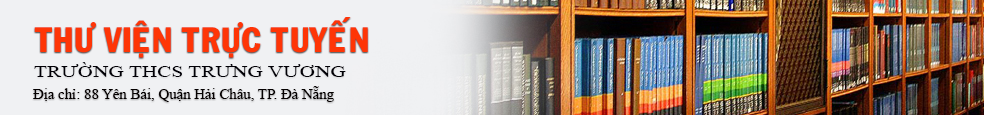
<style>
.page{position:relative;width:984px;height:115px;background:#f0f1f3}
.page>*{position:absolute;margin:0}
.t1{font:34.4px "VNI-Franko";color:#fe3506}
.t2{font:17.5px "TimesNewRomanPSMT";color:#010006;scale:1.22 1}
.t3{font:14.6px "TimesNewRomanPSMT";color:#040000}
</style>
<div class="page">
<p class="t1" style="left:34px;top:17px;width:334px;height:41px">THÖ VIEÄN TRÖÏC TUYEÁN</p>
<p class="t2" style="left:34px;top:62px;width:312px;height:15px">TRƯỜNG THCS TRƯNG VƯƠNG</p>
<p class="t3" style="left:33px;top:86px;width:301px;height:16px">Địa chỉ: 88 Yên Bái, Quận Hải Châu, TP. Đà Nẵng</p>
</div>
